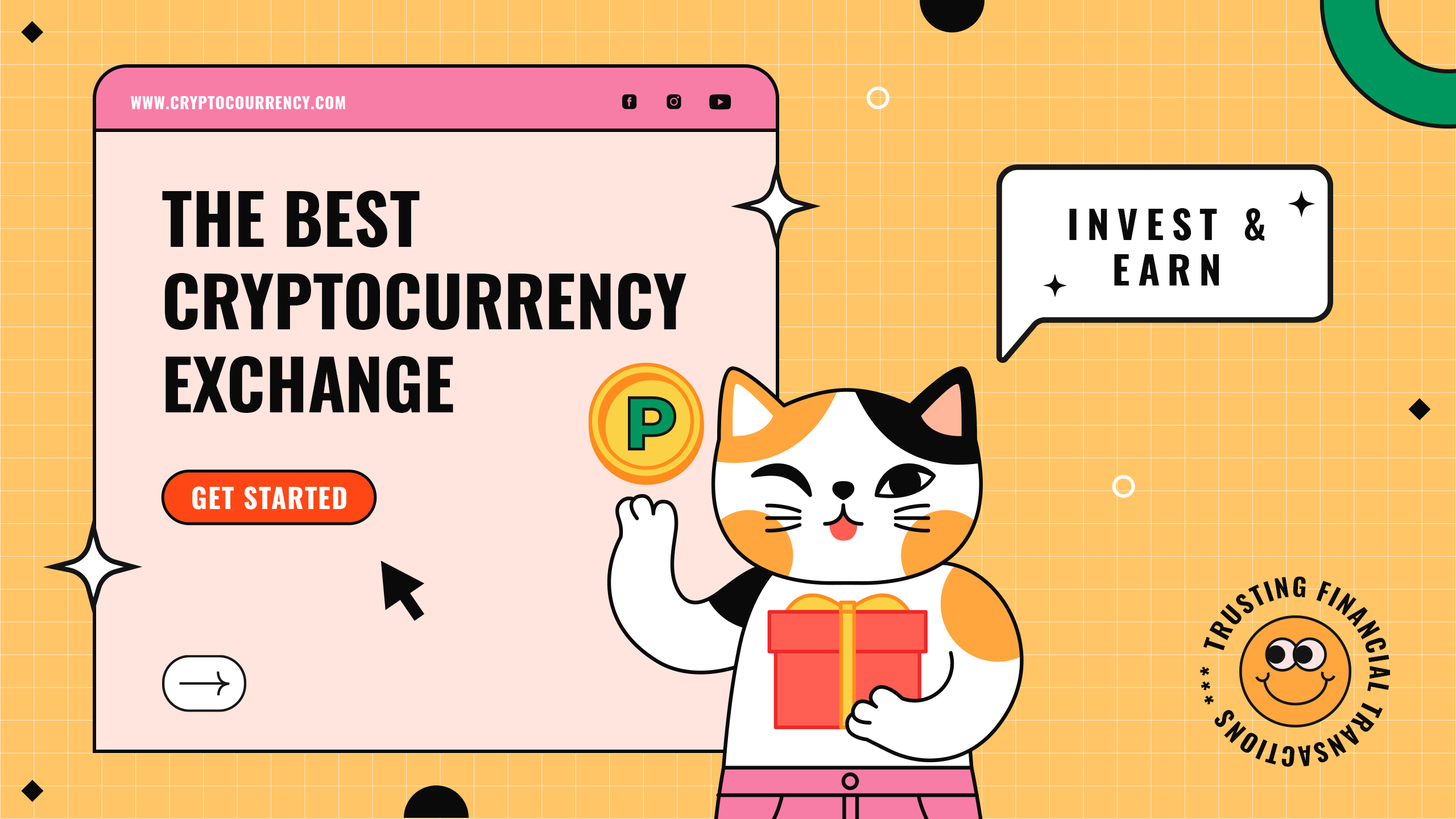
<style>
.page{position:relative;width:1456px;height:819px;background:#ffc567}
.page>*{position:absolute;margin:0}
.t1{font:15.7px "Oswald-Bold";letter-spacing:0.05em;color:#fefefe;text-transform:uppercase}
.t2{font:68.9px "Oswald-Bold";color:#0a0a0a;text-transform:uppercase}
.t3{font:38.2px "Oswald-Bold";letter-spacing:0.2em;color:#0a0a0a;text-transform:uppercase;scale:1.04 1}
.t4{font:27.1px "Oswald-Bold";letter-spacing:0.05em;color:#ffffff;text-transform:uppercase}
.t5{font:25.1px "Oswald-Bold";letter-spacing:0.05em;color:#0a0a0a;text-transform:uppercase}
</style>
<div class="page">
<p class="t1" style="left:131px;top:96px;width:214px;height:13px">WWW.CRYPTOCOURRENCY.COM</p>
<p class="t2" style="left:162px;top:191px;width:524px;height:222px">The best <br>cryptocurrency <br>exchange</p>
<p class="t3" style="left:1069px;top:208px;width:195px;height:78px;text-align:center">invest &amp;<br>earn</p>
<p class="t4" style="left:192px;top:486px;width:154px;height:24px">get started</p>
<p class="t5" style="left:1200px;top:576px;width:190px;height:191px;rotate:60deg">Trusting financial transactions ***</p>
</div>
